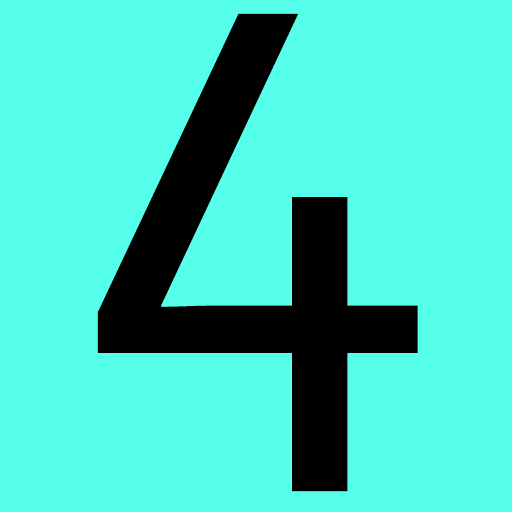
<style>
.page{position:relative;width:512px;height:512px;background:#55ffea}
.page>*{position:absolute;margin:0}
.t1{font:731px "Corbel";color:#000000}
</style>
<div class="page">
<p class="t1" style="left:97px;top:13px;width:321px;height:479px">4</p>
</div>
